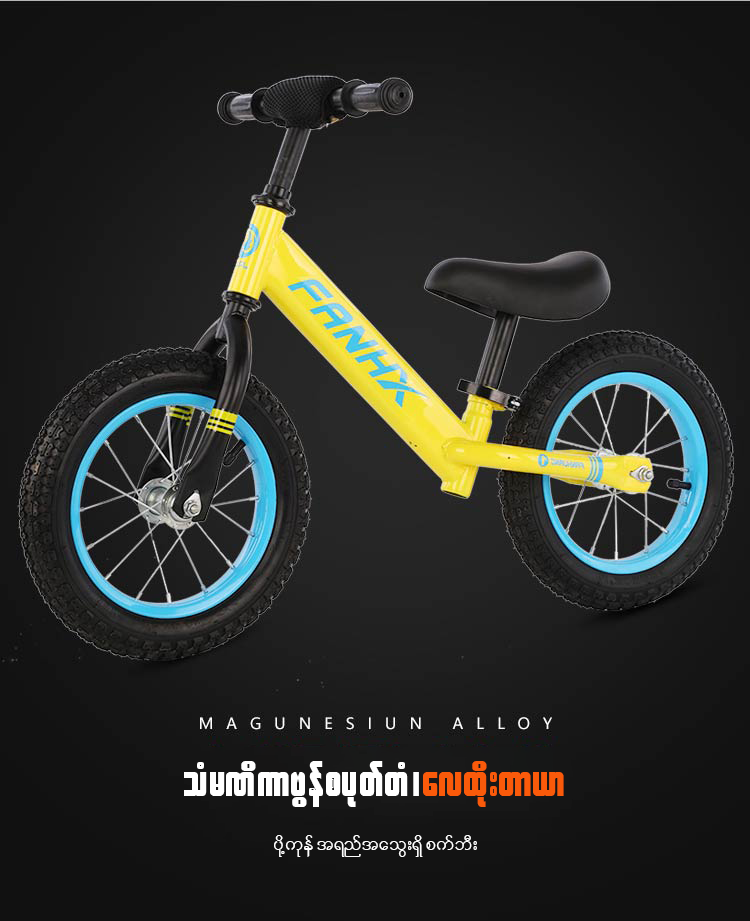
<style>
.page{position:relative;width:750px;height:921px}
.page>*{position:absolute;margin:0}
.t1{font:47.1px "W30ArtHouse";letter-spacing:0.02em;color:#ffffff}
.t2{font:47.1px "W30ArtHouse";letter-spacing:0.02em;color:#fa5a0a}
.t3{font:24px "W01ArtHouseWin";letter-spacing:0.02em;color:#ffffff}
</style>
<div class="page">
<p class="t1" style="left:184px;top:761px;width:380px;height:46px">oHrPdumAGefpykwfwH?<span class="t2">avxdk;wm,m</span></p>
<p class="t3" style="left:274px;top:835px;width:203px;height:22px">ydkYukef t&amp;nftaoG;&amp;Sd pufbD;</p>
</div>
